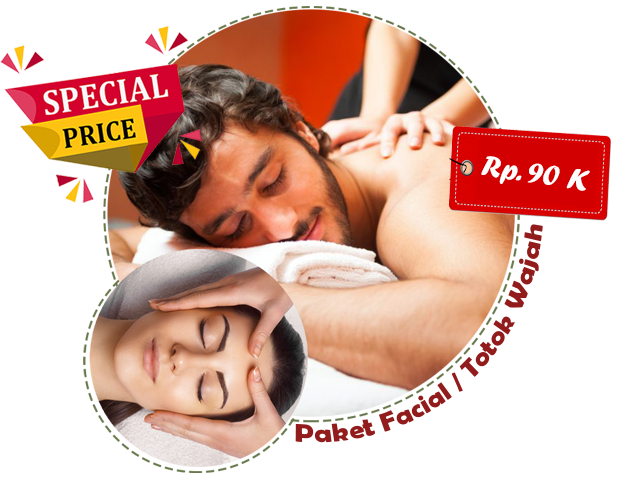
<style>
.page{position:relative;width:640px;height:480px;background:#ffffff}
.page>*{position:absolute;margin:0}
.t1{font:30.9px "ForteMT";color:#fefefe}
.t2{font:26.6px "BerlinSansFBDemi-Bold";color:#921b1b;scale:0.92 1}
</style>
<div class="page">
<p class="t1" style="left:481px;top:156px;width:109px;height:35px;rotate:9deg">Rp. 90 K</p>
<p class="t2" style="left:295px;top:224px;width:248px;height:219px;rotate:-41deg">Paket Facial / Totok Wajah</p>
</div>
